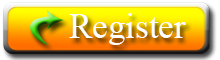
<style>
.page{position:relative;width:220px;height:60px}
.page>*{position:absolute;margin:0}
.t1{font:35px "TimesNewRomanPSMT";color:#ffffff}
</style>
<div class="page">
<p class="t1" style="left:69px;top:13px;width:117px;height:32px">Register</p>
</div>
